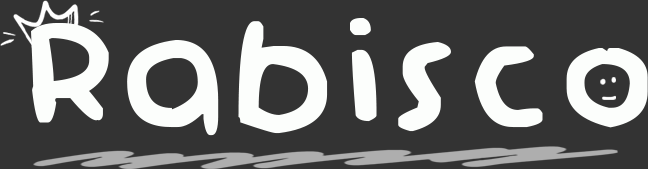
<style>
.page{position:relative;width:648px;height:169px;background:#333333}
.page>*{position:absolute;margin:0}
.t1{font:184.4px "Baby-Doll";color:#fcfefc}
</style>
<div class="page">
<p class="t1" style="left:31px;top:18px;width:617px;height:118px">Rabisco</p>
</div>
